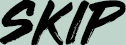
<style>
.page{position:relative;width:126px;height:45px;background:#bfd5cc}
.page>*{position:absolute;margin:0}
.t1{font:72px "ThirdRail";color:#000000}
</style>
<div class="page">
<p class="t1" style="left:0px;top:0px;width:126px;height:47px">skip</p>
</div>
